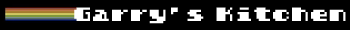
<style>
.page{position:relative;width:350px;height:30px;background:#000000}
.page>*{position:absolute;margin:0}
.t1{font:18px "Solomon's-Key-True-Type";letter-spacing:0.05em;color:#ffffff}
</style>
<div class="page">
<p class="t1" style="left:74px;top:7px;width:272px;height:17px">Garry’s Kitchen</p>
</div>
